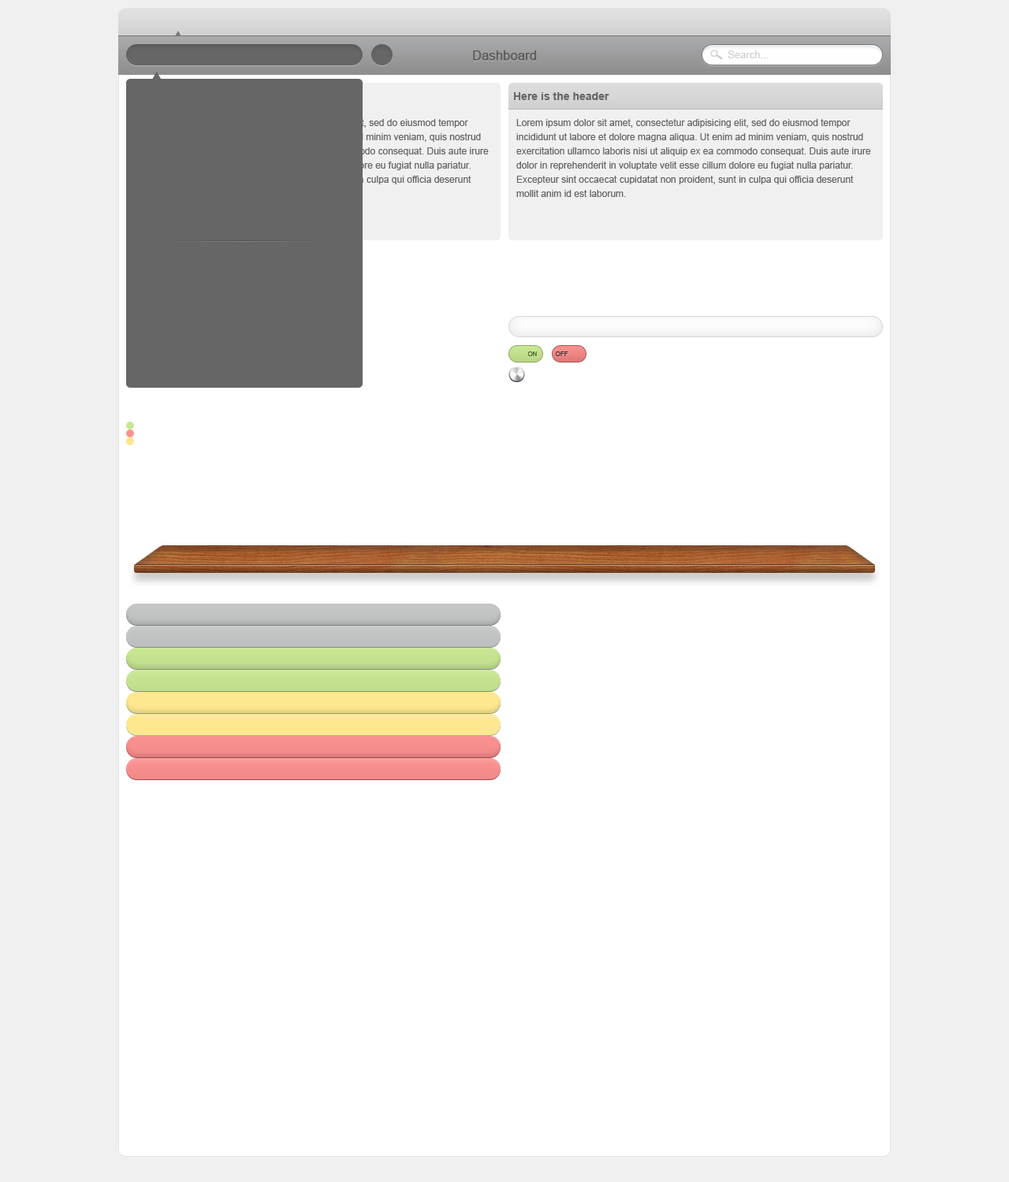
<style>
.page{position:relative;width:1009px;height:1182px;background:#ffffff}
.page>*{position:absolute;margin:0}
.t1{font:12.6px "ArialMT";color:#5e5e5e;font-weight:bold}
.t2{font:10.2px "ArialMT";color:#cfcfcf}
.t3{font:11px "Arial-BoldMT";color:#666666}
.t4{font:9.5px/14.2px "ArialMT";color:#666666}
.t5{font:6.3px "ArialMT";color:#46601c}
.t6{font:6.3px "ArialMT";color:#482929}
</style>
<div class="page">
<p class="t1" style="left:473px;top:50px;width:64px;height:11px">Dashboard</p>
<p class="t2" style="left:727px;top:50px;width:41px;height:8px">Search...</p>
<p class="t3" style="left:514px;top:92px;width:95px;height:8px">Here is the header</p>
<p class="t4" style="left:516px;top:119px;width:355px;height:78px">Lorem ipsum dolor sit amet, consectetur adipisicing elit, sed do eiusmod tempor incididunt ut labore et dolore magna aliqua. Ut enim ad minim veniam, quis nostrud exercitation ullamco laboris nisi ut aliquip ex ea commodo consequat. Duis aute irure dolor in reprehenderit in voluptate velit esse cillum dolore eu fugiat nulla pariatur. Excepteur sint occaecat cupidatat non proident, sunt in culpa qui officia deserunt mollit anim id est laborum.</p>
<p class="t5" style="left:527px;top:351px;width:10px;height:5px">ON</p>
<p class="t6" style="left:556px;top:351px;width:12px;height:5px">OFF</p>
</div>
